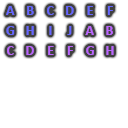
<style>
.page{position:relative;width:128px;height:128px;background:#ffffff}
.page>*{position:absolute;margin:0}
.t1{font:14px "Calibri-Bold";color:#6666ff}
.t2{font:14px "Calibri-Bold";color:#bb66ff}
</style>
<div class="page">
<p class="t1" style="left:6px;top:6px;width:9px;height:9px">A</p>
<p class="t1" style="left:27px;top:6px;width:7px;height:9px">B</p>
<p class="t1" style="left:47px;top:6px;width:7px;height:9px">C</p>
<p class="t1" style="left:66px;top:6px;width:8px;height:9px">D</p>
<p class="t1" style="left:87px;top:6px;width:6px;height:9px">E</p>
<p class="t1" style="left:107px;top:6px;width:6px;height:9px">F</p>
<p class="t1" style="left:6px;top:26px;width:9px;height:9px">G</p>
<p class="t1" style="left:26px;top:26px;width:8px;height:9px">H</p>
<p class="t1" style="left:49px;top:26px;width:3px;height:9px">I</p>
<p class="t1" style="left:67px;top:26px;width:5px;height:9px">J</p>
<p class="t2" style="left:85px;top:26px;width:9px;height:9px">A</p>
<p class="t2" style="left:106px;top:26px;width:7px;height:9px">B</p>
<p class="t2" style="left:7px;top:46px;width:7px;height:9px">C</p>
<p class="t2" style="left:26px;top:46px;width:8px;height:9px">D</p>
<p class="t2" style="left:48px;top:46px;width:6px;height:9px">E</p>
<p class="t2" style="left:67px;top:46px;width:6px;height:9px">F</p>
<p class="t2" style="left:86px;top:46px;width:8px;height:9px">G</p>
<p class="t2" style="left:106px;top:46px;width:8px;height:9px">H</p>
</div>
